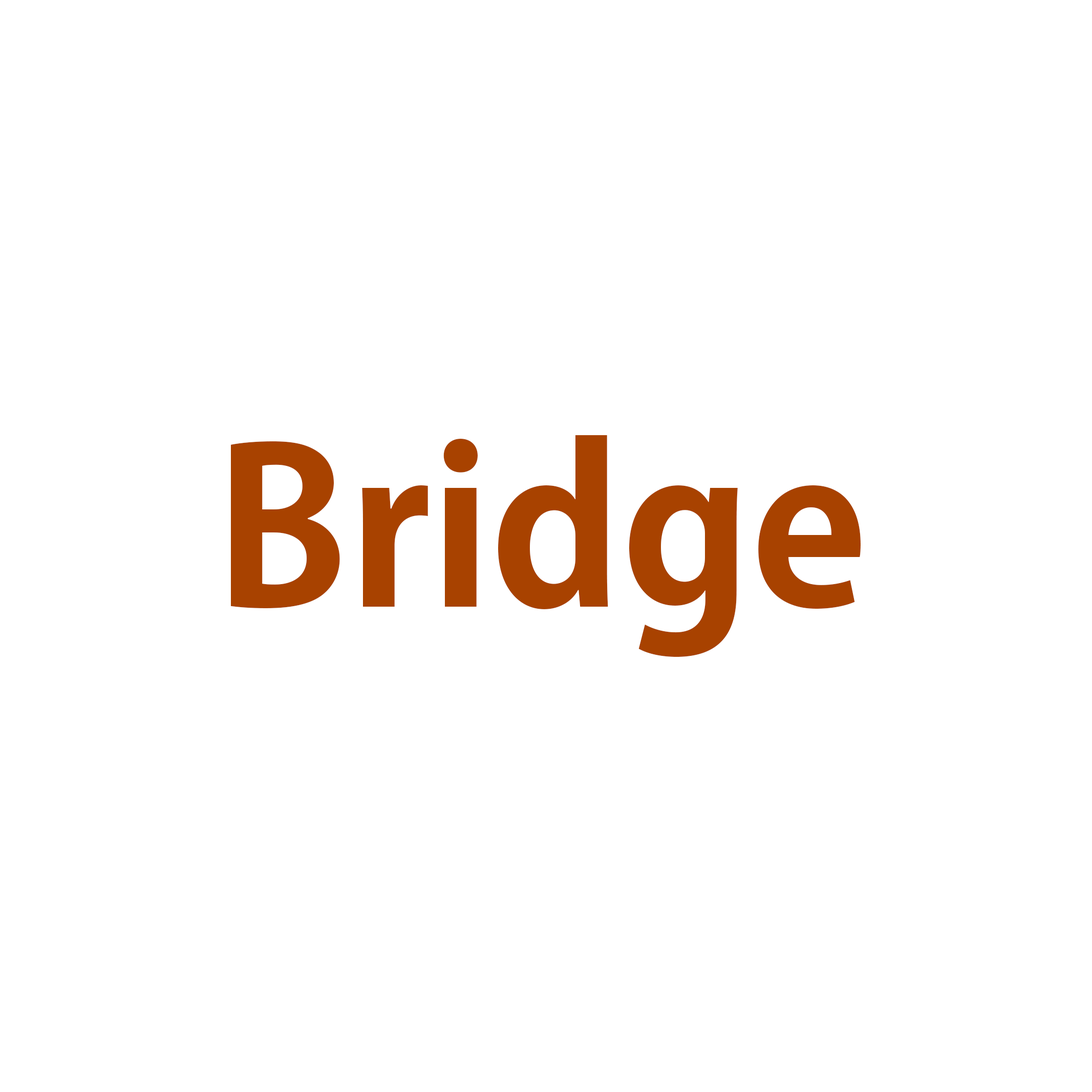
<style>
.page{position:relative;width:1092px;height:1092px;background:#ffffff}
.page>*{position:absolute;margin:0}
.t1{font:213.3px "KozGoPr6N-Bold";color:#a84200}
</style>
<div class="page">
<p class="t1" style="left:231px;top:435px;width:630px;height:222px">Bridge</p>
</div>
